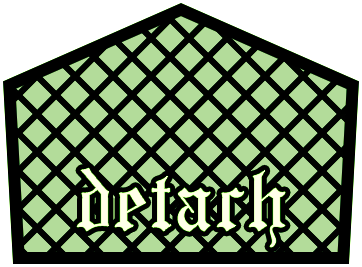
<style>
.page{position:relative;width:362px;height:267px;background:#b3dc9a}
.page>*{position:absolute;margin:0}
.t1{font:80px "Baxter";color:#f0f0f0}
</style>
<div class="page">
<p class="t1" style="left:77px;top:168px;width:208px;height:79px">detach</p>
</div>
